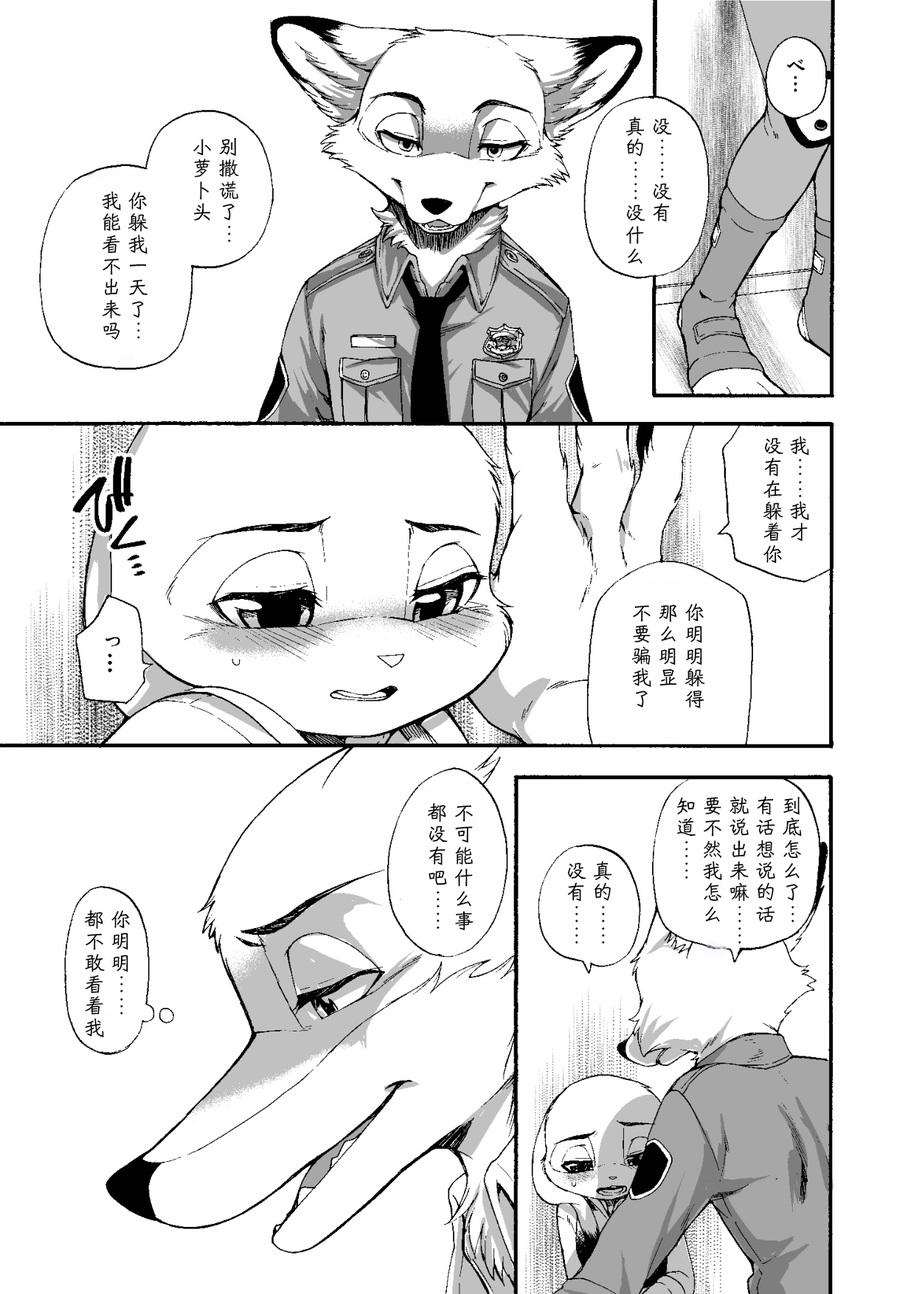
<style>
.page{position:relative;width:922px;height:1294px;background:#ffffff}
.page>*{position:absolute;margin:0}
.t1{font:20.6px/26.5px "HYShiWei55U";letter-spacing:0.05em;color:#000000}
</style>
<div class="page">
<p class="t1" style="left:625px;top:117px;width:47px;height:147px">没……没有<br>真的……没什么</p>
<p class="t1" style="left:193px;top:137px;width:46px;height:106px">别撒谎了…<br>小萝卜头</p>
<p class="t1" style="left:102px;top:191px;width:46px;height:149px">你躲我一天了…<br>我能看不出来吗</p>
<p class="t1" style="left:763px;top:436px;width:46px;height:127px">我……我才<br>没有在躲着你</p>
<p class="t1" style="left:631px;top:603px;width:74px;height:105px">你明明躲得<br>那么明显<br>不要骗我了</p>
<p class="t1" style="left:677px;top:796px;width:125px;height:148px">到底怎么了…<br>有话想说的话<br>就说出来嘛……<br>要不然我怎么<br>知道……</p>
<p class="t1" style="left:427px;top:802px;width:46px;height:128px">不可能什么事<br>都没有吧……</p>
<p class="t1" style="left:567px;top:861px;width:45px;height:83px">真的……<br>没有……</p>
<p class="t1" style="left:84px;top:909px;width:46px;height:128px">你明明……<br>都不敢看着我</p>
</div>
